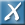
<style>
.page{position:relative;width:25px;height:25px}
.page>*{position:absolute;margin:0}
.t1{font:24.6px "Mistral";color:#ffffff;scale:1.48 1}
</style>
<div class="page">
<p class="t1" style="left:4px;top:2px;width:17px;height:19px">X</p>
</div>
